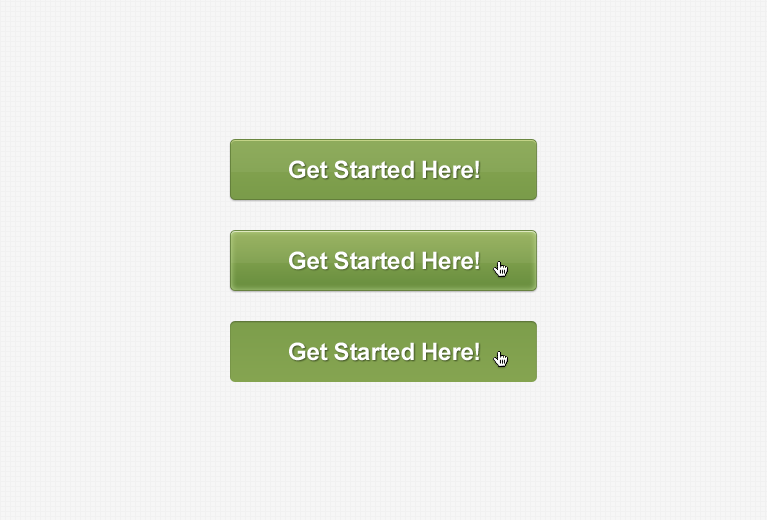
<style>
.page{position:relative;width:767px;height:520px;background:#f6f6f6}
.page>*{position:absolute;margin:0}
.t1{font:24px "Arial-BoldMT";letter-spacing:-0.01em;color:#ffffff}
</style>
<div class="page">
<p class="t1" style="left:289px;top:160px;width:190px;height:19px">Get Started Here!</p>
<p class="t1" style="left:289px;top:251px;width:190px;height:19px">Get Started Here!</p>
<p class="t1" style="left:289px;top:342px;width:190px;height:19px">Get Started Here!</p>
</div>
